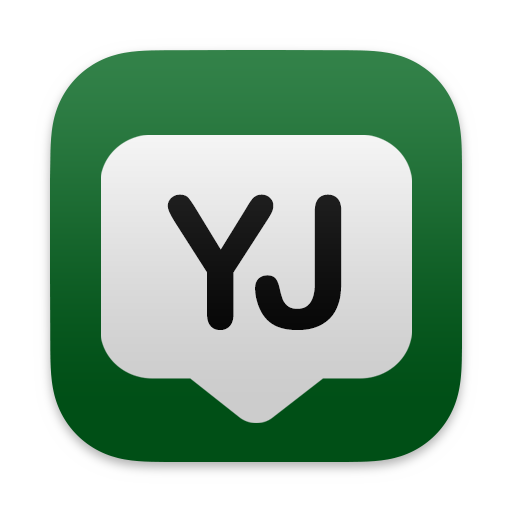
<style>
.page{position:relative;width:512px;height:512px;background:#ffffff}
.page>*{position:absolute;margin:0}
.t1{font:182.7px "ArialRoundedMTBold";letter-spacing:-0.1em;color:#000000}
</style>
<div class="page">
<p class="t1" style="left:167px;top:194px;width:175px;height:136px">YJ</p>
</div>
